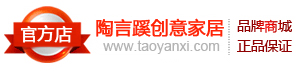
<style>
.page{position:relative;width:297px;height:71px;background:#ffffff}
.page>*{position:absolute;margin:0}
.t1{font:17px "MicrosoftYaHei";color:#ffffff;font-weight:bold}
.t2{font:18px "MicrosoftYaHei";color:#ff2306;font-weight:bold}
.t3{font:14px "ArialMT";color:#b4b4b4}
</style>
<div class="page">
<p class="t1" style="left:20px;top:25px;width:53px;height:18px">官方店</p>
<p class="t2" style="left:96px;top:18px;width:128px;height:19px">陶言蹊创意家居</p>
<p class="t3" style="left:103px;top:40px;width:117px;height:14px">www.taoyanxi.com</p>
</div>
